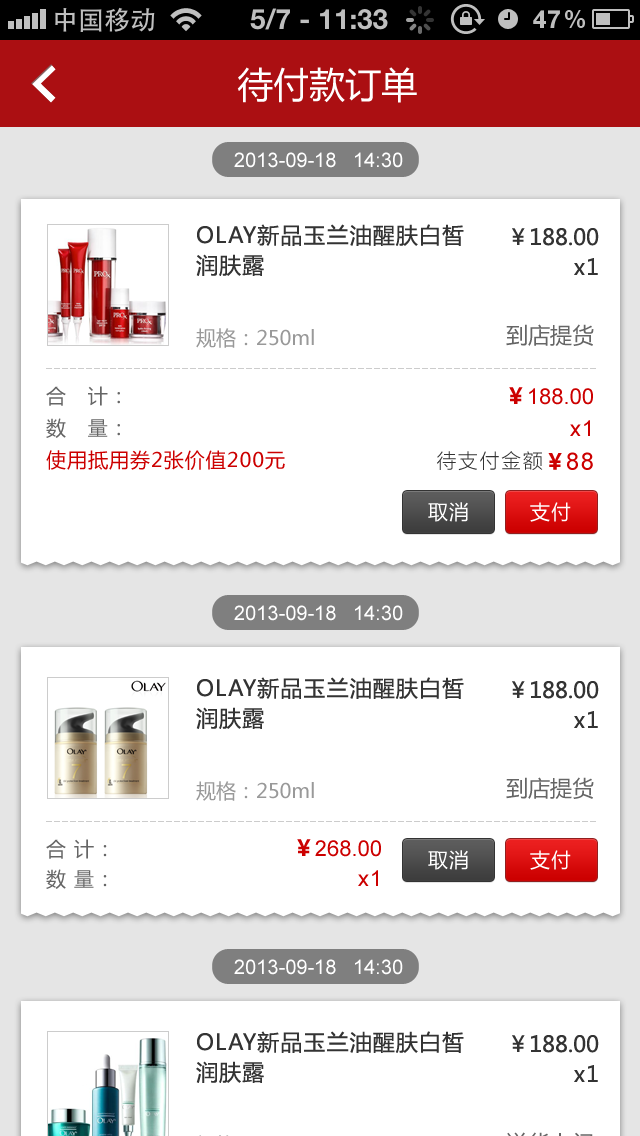
<style>
.page{position:relative;width:640px;height:1136px;background:#ffffff}
.page>*{position:absolute;margin:0}
.t1{font:36px "MicrosoftYaHei";color:#ffffff}
.t2{font:20px "ArialMT";color:#ffffff}
.t3{font:22px/30px "MicrosoftYaHei";letter-spacing:0.05em;color:#333333}
.t4{font:22px/30px "MicrosoftYaHei";color:#333333}
.t5{font:20px "MicrosoftYaHei";color:#999999}
.t6{font:22px "MicrosoftYaHei";color:#666666}
.t7{font:18px "MicrosoftYaHei";color:#cccccc}
.t8{font:20px/32px "MicrosoftYaHei";letter-spacing:0.05em;color:#666666}
.t9{font:20px/32px "MicrosoftYaHei";letter-spacing:0.05em;color:#cc0000}
.t10{font:22px/32px "ArialMT";color:#cc0000}
.t11{font:22px/32px "MicrosoftYaHei-Bold";color:#cc0000}
.t12{font:22px/32px "ArialMT";letter-spacing:0.05em;color:#cc0000}
.t13{font:20px/32px "STHeitiSC-Medium";letter-spacing:0.05em;color:#333333}
.t14{font:24px/32px "ArialMT";letter-spacing:0.05em;color:#cc0000}
.t15{font:20px "MicrosoftYaHei";letter-spacing:0.05em;color:#ffffff}
.t16{font:20px/30px "MicrosoftYaHei";letter-spacing:0.05em;color:#666666}
.t17{font:22px/30px "ArialMT";color:#cc0000}
.t18{font:22px/30px "MicrosoftYaHei-Bold";color:#cc0000}
.t19{font:22px/30px "ArialMT";letter-spacing:0.05em;color:#cc0000}
</style>
<div class="page">
<p class="t1" style="left:237px;top:67px;width:180px;height:36px">待付款订单</p>
<p class="t2" style="left:234px;top:152px;width:169px;height:16px">2013-09-18   14:30</p>
<p class="t3" style="left:196px;top:224px;width:268px;height:52px">OLAY新品玉兰油醒肤白皙<br>润肤露</p>
<p class="t4" style="left:512px;top:228px;width:87px;height:47px;text-align:right">￥188.00<br><span class="t3">x1</span></p>
<p class="t5" style="left:196px;top:328px;width:118px;height:20px">规格：250ml</p>
<p class="t6" style="left:506px;top:324px;width:88px;height:22px">到店提货</p>
<p class="t7" style="left:46px;top:368px;width:550px;height:1px">---------------------------------------------------------------------</p>
<p class="t8" style="left:46px;top:386px;width:239px;height:84px">合   计：<br>数   量：<br><span class="t9">使用抵用券2张价值200元</span></p>
<p class="t10" style="left:437px;top:387px;width:156px;height:84px;text-align:right"><span class="t11">￥</span>188.00<br><span class="t12">x1<br></span><span class="t13">待支付金额</span><span class="t11">￥</span><span class="t14">88</span></p>
<p class="t15" style="left:428px;top:502px;width:40px;height:20px">取消</p>
<p class="t15" style="left:530px;top:502px;width:41px;height:20px">支付</p>
<p class="t2" style="left:234px;top:605px;width:169px;height:16px">2013-09-18   14:30</p>
<p class="t3" style="left:196px;top:677px;width:268px;height:52px">OLAY新品玉兰油醒肤白皙<br>润肤露</p>
<p class="t4" style="left:512px;top:681px;width:87px;height:47px;text-align:right">￥188.00<br><span class="t3">x1</span></p>
<p class="t5" style="left:196px;top:781px;width:118px;height:20px">规格：250ml</p>
<p class="t6" style="left:506px;top:777px;width:88px;height:22px">到店提货</p>
<p class="t7" style="left:46px;top:821px;width:550px;height:1px">---------------------------------------------------------------------</p>
<p class="t16" style="left:46px;top:839px;width:61px;height:50px">合 计：<br>数 量：</p>
<p class="t17" style="left:297px;top:839px;width:84px;height:47px;text-align:right"><span class="t18">￥</span>268.00<br><span class="t19">x1</span></p>
<p class="t15" style="left:428px;top:850px;width:40px;height:20px">取消</p>
<p class="t15" style="left:530px;top:850px;width:41px;height:20px">支付</p>
<p class="t2" style="left:234px;top:959px;width:169px;height:16px">2013-09-18   14:30</p>
<p class="t3" style="left:196px;top:1031px;width:268px;height:52px">OLAY新品玉兰油醒肤白皙<br>润肤露</p>
<p class="t4" style="left:512px;top:1035px;width:87px;height:47px;text-align:right">￥188.00<br><span class="t3">x1</span></p>
</div>
